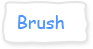
<style>
.page{position:relative;width:93px;height:49px;background:#ffffff}
.page>*{position:absolute;margin:0}
.t1{font:18px "ComicSansMS";color:#4f95ff}
</style>
<div class="page">
<p class="t1" style="left:18px;top:15px;width:46px;height:14px">Brush</p>
</div>
